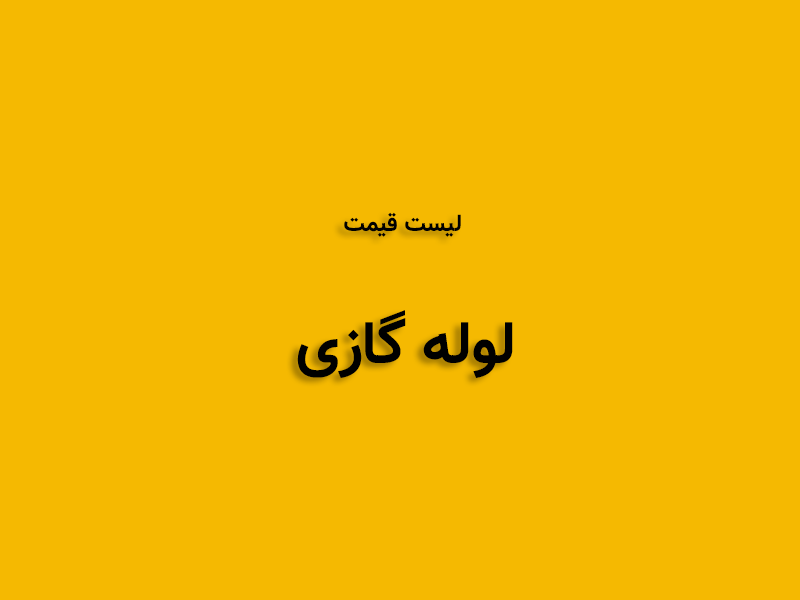
<style>
.page{position:relative;width:800px;height:600px;background:#f5b901}
.page>*{position:absolute;margin:0}
.t1{font:24px "Vazir-Bold";color:#000000}
.t2{font:60px "Vazir-Bold";color:#000000}
</style>
<div class="page">
<p class="t1" style="left:297px;top:212px;width:216px;height:166px;text-align:center">لیست قیمت <br><br><span class="t2">لوله گازی</span></p>
</div>
